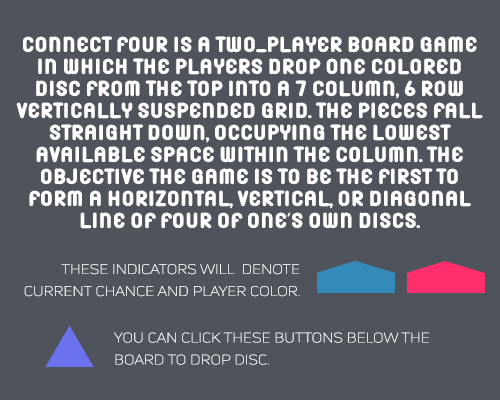
<style>
.page{position:relative;width:500px;height:400px;background:#4f545c}
.page>*{position:absolute;margin:0}
.t1{font:20.4px/22px "Yolissa";color:#ffffff;text-transform:uppercase;scale:1.18 1}
.t2{font:13.6px/22px "UniNeueLight";color:#ffffff;text-transform:uppercase;scale:1.18 1}
</style>
<div class="page">
<p class="t1" style="left:16px;top:36px;width:467px;height:193px;text-align:center">Connect Four is a two-player board game in which the players drop one colored disc from the top into a 7 column, 6 row vertically suspended grid. The pieces fall straight down, occupying the lowest available space within the column. The objective the game is to be the first to form a horizontal, vertical, or diagonal line of four of one's own discs.</p>
<p class="t2" style="left:24px;top:264px;width:276px;height:33px;text-align:right">these indicators will  denote<br> current chance and player color.</p>
<p class="t2" style="left:114px;top:332px;width:315px;height:33px">you can click these buttons below the board to drop disc.</p>
</div>
